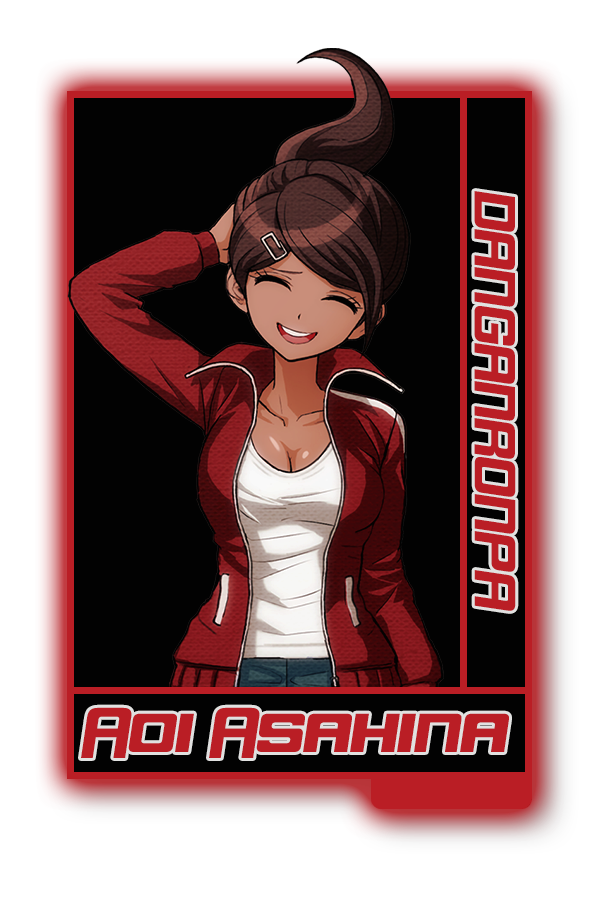
<style>
.page{position:relative;width:600px;height:900px;background:#020202}
.page>*{position:absolute;margin:0}
.t1{font:48.8px "DorBlue";color:#bb2c2e}
.t2{font:60.3px "DorBlue";color:#bb2c2e}
</style>
<div class="page">
<p class="t1" style="left:474px;top:191px;width:42px;height:420px;rotate:90deg">DANGANRONPA</p>
<p class="t2" style="left:81px;top:707px;width:428px;height:51px">Aoi Asahina</p>
</div>
